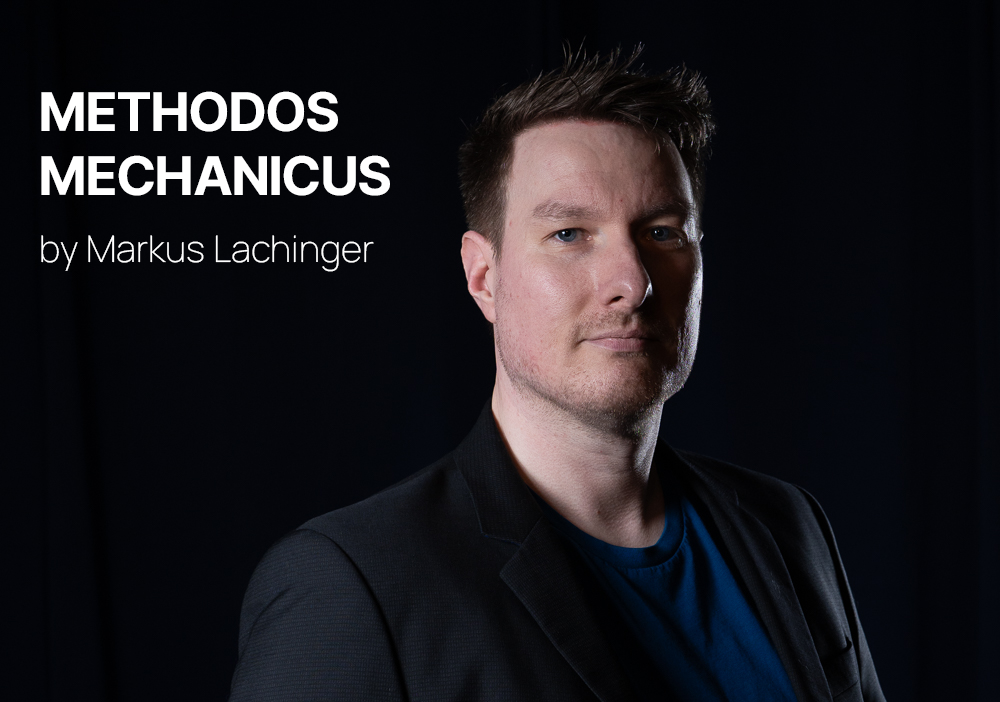
<style>
.page{position:relative;width:1000px;height:702px}
.page>*{position:absolute;margin:0}
.t1{font:53.3px "InterTight-Bold";color:#ffffff}
.t2{font:36.7px "Manrope-ExtraLight";color:#ffffff}
</style>
<div class="page">
<p class="t1" style="left:41px;top:91px;width:349px;height:105px">METHODOS <br>MECHANICUS</p>
<p class="t2" style="left:41px;top:235px;width:333px;height:37px">by Markus Lachinger</p>
</div>
